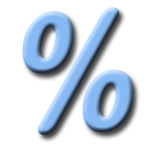
<style>
.page{position:relative;width:150px;height:150px;background:#ffffff}
.page>*{position:absolute;margin:0}
.t1{font:171.9px "BalloonBT-ExtraBold"}
</style>
<div class="page">
<p class="t1" style="left:22px;top:7px;width:112px;height:128px">%</p>
</div>
